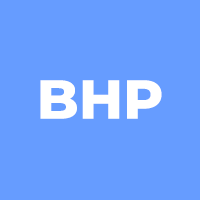
<style>
.page{position:relative;width:200px;height:200px;background:#669cff}
.page>*{position:absolute;margin:0}
.t1{font:55px "Montserrat-ExtraBold";color:#ffffff}
</style>
<div class="page">
<p class="t1" style="left:40px;top:80px;width:122px;height:39px">BHP</p>
</div>
